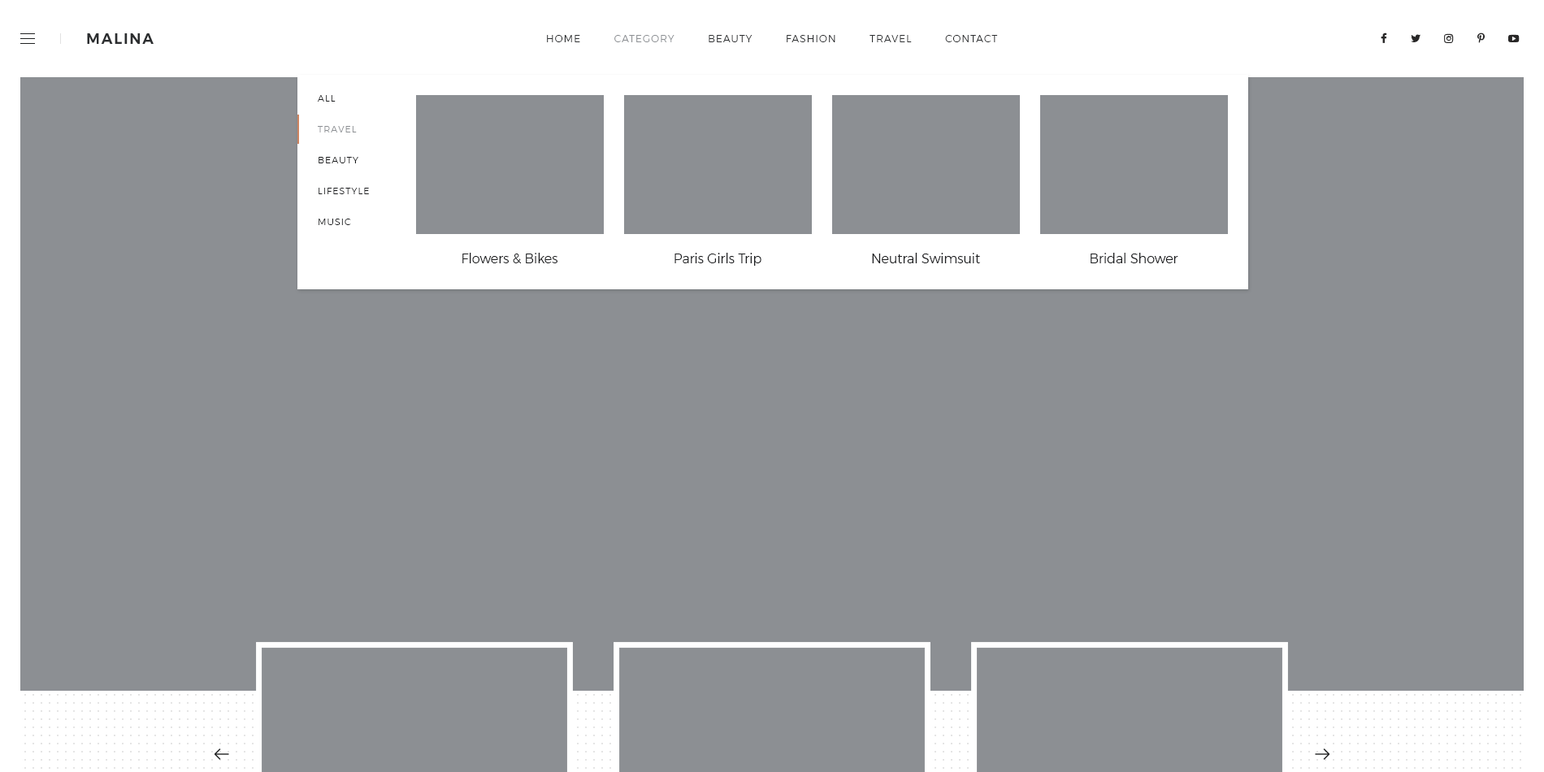
<style>
.page{position:relative;width:1544px;height:772px;background:#8c8f93}
.page>*{position:absolute;margin:0}
.t1{font:14.6px "Montserrat-SemiBold";letter-spacing:0.1em;color:#2c2e30;text-transform:uppercase}
.t2{font:9.8px "Montserrat-Light";letter-spacing:0.1em;color:#2c2e30;text-transform:uppercase}
.t3{font:9.8px "Montserrat-Light";letter-spacing:0.1em;color:#8c8f93;text-transform:uppercase}
.t4{font:8.9px/30.9px "Montserrat-Light";letter-spacing:0.1em;color:#1c1d1f;text-transform:uppercase}
.t5{font:8.9px/30.9px "Montserrat-Light";letter-spacing:0.1em;color:#8c8f93;text-transform:uppercase}
.t6{font:13px "Montserrat-Light";color:#1c1d1f}
</style>
<div class="page">
<p class="t1" style="left:87px;top:33px;width:67px;height:11px">Malina</p>
<p class="t2" style="left:547px;top:35px;width:451px;height:7px">Home         <span class="t3">Category</span>         Beauty         Fashion         Travel         Contact</p>
<p class="t4" style="left:317px;top:95px;width:52px;height:130px">All<br><span class="t5">Travel</span> <br>Beauty <br>Lifestyle <br>Music</p>
<p class="t6" style="left:462px;top:253px;width:96px;height:10px">Flowers &amp; Bikes</p>
<p class="t6" style="left:675px;top:253px;width:87px;height:13px">Paris Girls Trip</p>
<p class="t6" style="left:872px;top:253px;width:108px;height:10px">Neutral Swimsuit</p>
<p class="t6" style="left:1091px;top:253px;width:88px;height:10px">Bridal Shower</p>
</div>
